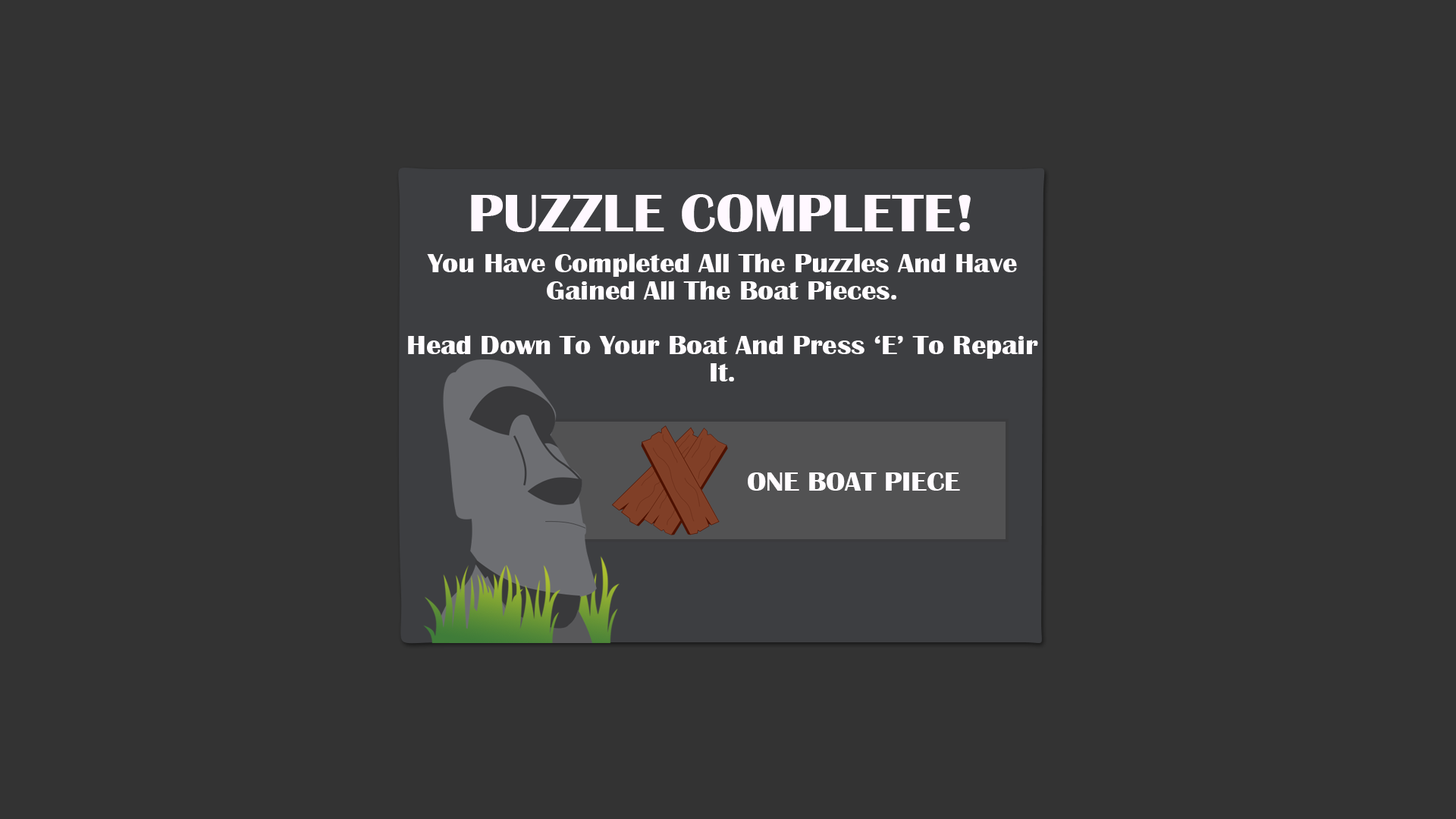
<style>
.page{position:relative;width:1456px;height:819px;background:#333333}
.page>*{position:absolute;margin:0}
.t1{font:54.6px "BritannicBold";letter-spacing:-0.005em;color:#fff8ff;scale:1.08 1}
.t2{font:27.3px/27.3px "BritannicBold";letter-spacing:-0.005em;color:#fffcff;scale:1.08 1}
.t3{font:27.3px "BritannicBold";letter-spacing:-0.005em;color:#fffcff;scale:1.08 1}
</style>
<div class="page">
<p class="t1" style="left:471px;top:194px;width:500px;height:38px">PUZZLE COMPLETE!</p>
<p class="t2" style="left:408px;top:253px;width:630px;height:128px;text-align:center">You Have Completed All The Puzzles And Have Gained All The Boat Pieces.<br><br>Head Down To Your Boat And Press ‘E’ To Repair It.</p>
<p class="t3" style="left:748px;top:472px;width:212px;height:19px">ONE BOAT PIECE</p>
</div>
